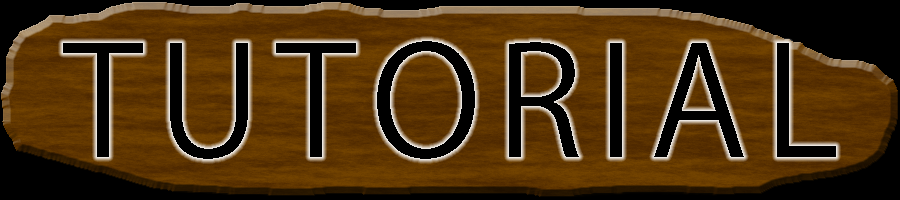
<style>
.page{position:relative;width:900px;height:200px;background:#000000}
.page>*{position:absolute;margin:0}
.t1{font:150px "KozGoPr6N-Regular";letter-spacing:0.1em;color:#000000}
</style>
<div class="page">
<p class="t1" style="left:63px;top:41px;width:773px;height:118px">TUTORIAL</p>
</div>
